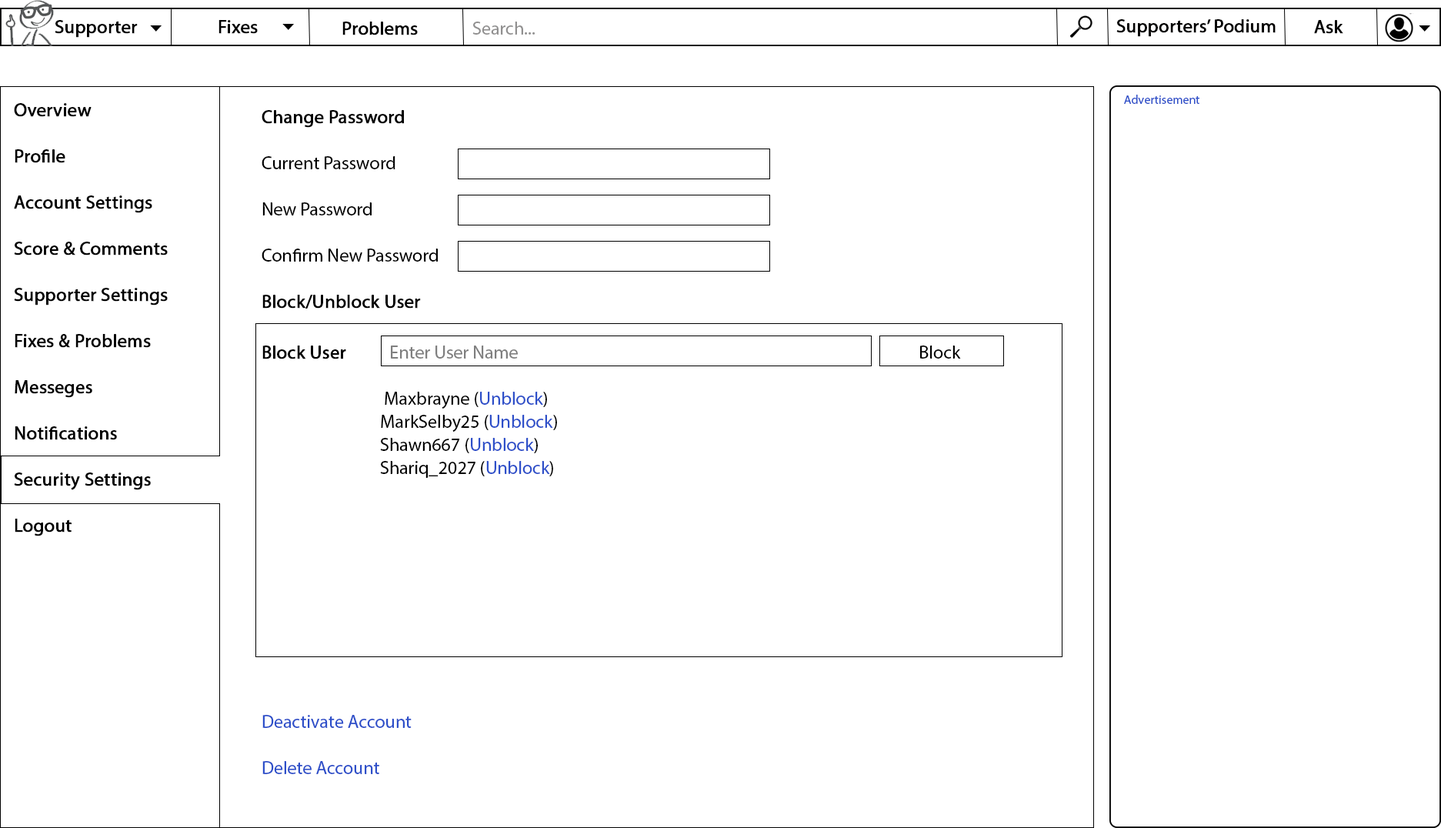
<style>
.page{position:relative;width:1441px;height:828px;background:#ffffff}
.page>*{position:absolute;margin:0}
.t1{font:18.5px "MyriadPro-Regular";color:#000000;font-weight:bold}
.t2{font:18.5px "MyriadPro-Regular";color:#919090}
.t3{font:18.5px "MyriadPro-Regular";color:#010000;font-weight:bold}
.t4{font:12.3px "MyriadPro-Regular";color:#2d4fc9}
.t5{font:18.5px/46.2px "MyriadPro-Regular";color:#000000;font-weight:bold}
.t6{font:18.5px/23.1px "MyriadPro-Regular";color:#000000}
.t7{font:18.5px/23.1px "MyriadPro-Regular";color:#000000;font-weight:bold}
.t8{font:18.5px/27.7px "MyriadPro-Regular";color:#000000;font-weight:bold}
.t9{font:18.5px/23.1px "MyriadPro-Regular";color:#7f7f7f}
.t10{font:18.5px/23.1px "MyriadPro-Regular";color:#2d4fc9}
</style>
<div class="page">
<p class="t1" style="left:55px;top:20px;width:83px;height:18px">Supporter</p>
<p class="t1" style="left:218px;top:20px;width:40px;height:14px">Fixes</p>
<p class="t1" style="left:342px;top:22px;width:76px;height:13px">Problems</p>
<p class="t2" style="left:472px;top:22px;width:63px;height:13px">Search...</p>
<p class="t3" style="left:1116px;top:19px;width:159px;height:18px">Supporters’ Podium</p>
<p class="t1" style="left:1314px;top:20px;width:29px;height:14px">Ask</p>
<p class="t4" style="left:1124px;top:95px;width:75px;height:9px">Advertisement</p>
<p class="t5" style="left:14px;top:103px;width:154px;height:433px">Overview<br>Profile<br>Account Settings<br>Score &amp; Comments<br>Supporter Settings<br>Fixes &amp; Problems<br>Messeges<br>Notifications<br>Security Settings<br>Logout</p>
<p class="t6" style="left:262px;top:110px;width:699px;height:664px"><span class="t5">Change Password<br><br></span>Current Password<br><br>New Password<br><br>Confirm New Password<br><br><span class="t7">Block/Unblock User<br><br></span><span class="t8">Block User     </span><span class="t9">Enter User Name                   </span>Block<br><br>       Maxbrayne (<span class="t10">Unblock</span>)<br>      MarkSelby25 (<span class="t10">Unblock</span>)<br>      Shawn667 (<span class="t10">Unblock</span>)<br>      Shariq_2027 (<span class="t10">Unblock</span>)<br><br><br><br><br><br><br><br><br><br><br><span class="t10">Deactivate Account<br><br>Delete Account</span></p>
</div>
